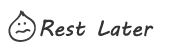
<style>
.page{position:relative;width:170px;height:52px;background:#ffffff}
.page>*{position:absolute;margin:0}
.t1{font:22px "MVBoli";color:#333333}
</style>
<div class="page">
<p class="t1" style="left:40px;top:19px;width:114px;height:18px">Rest Later</p>
</div>
